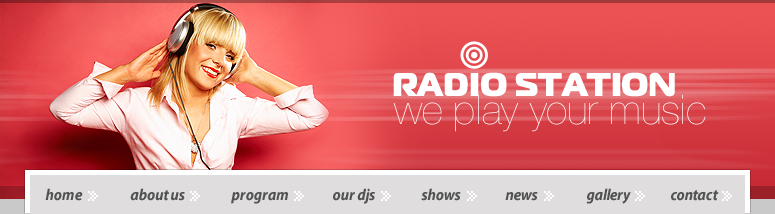
<style>
.page{position:relative;width:775px;height:214px}
.page>*{position:absolute;margin:0}
.t1{font:33px "MagistralBlackC";color:#ffffff}
.t2{font:41px "HelveticaNeueLTPro-UltLt";color:#ffffff}
.t3{font:16px "MyriadPro-BoldSemiCnIt";color:#525252}
</style>
<div class="page">
<p class="t1" style="left:393px;top:72px;width:282px;height:25px">RADIO STATION</p>
<p class="t2" style="left:393px;top:94px;width:313px;height:38px">we play your music</p>
<p class="t3" style="left:45px;top:188px;width:38px;height:13px">home</p>
<p class="t3" style="left:130px;top:188px;width:55px;height:13px">about us</p>
<p class="t3" style="left:231px;top:192px;width:57px;height:12px">program</p>
<p class="t3" style="left:333px;top:188px;width:42px;height:16px">our djs</p>
<p class="t3" style="left:421px;top:188px;width:40px;height:13px">shows</p>
<p class="t3" style="left:505px;top:192px;width:33px;height:9px">news</p>
<p class="t3" style="left:586px;top:188px;width:45px;height:16px">gallery</p>
<p class="t3" style="left:671px;top:190px;width:48px;height:11px">contact</p>
</div>
